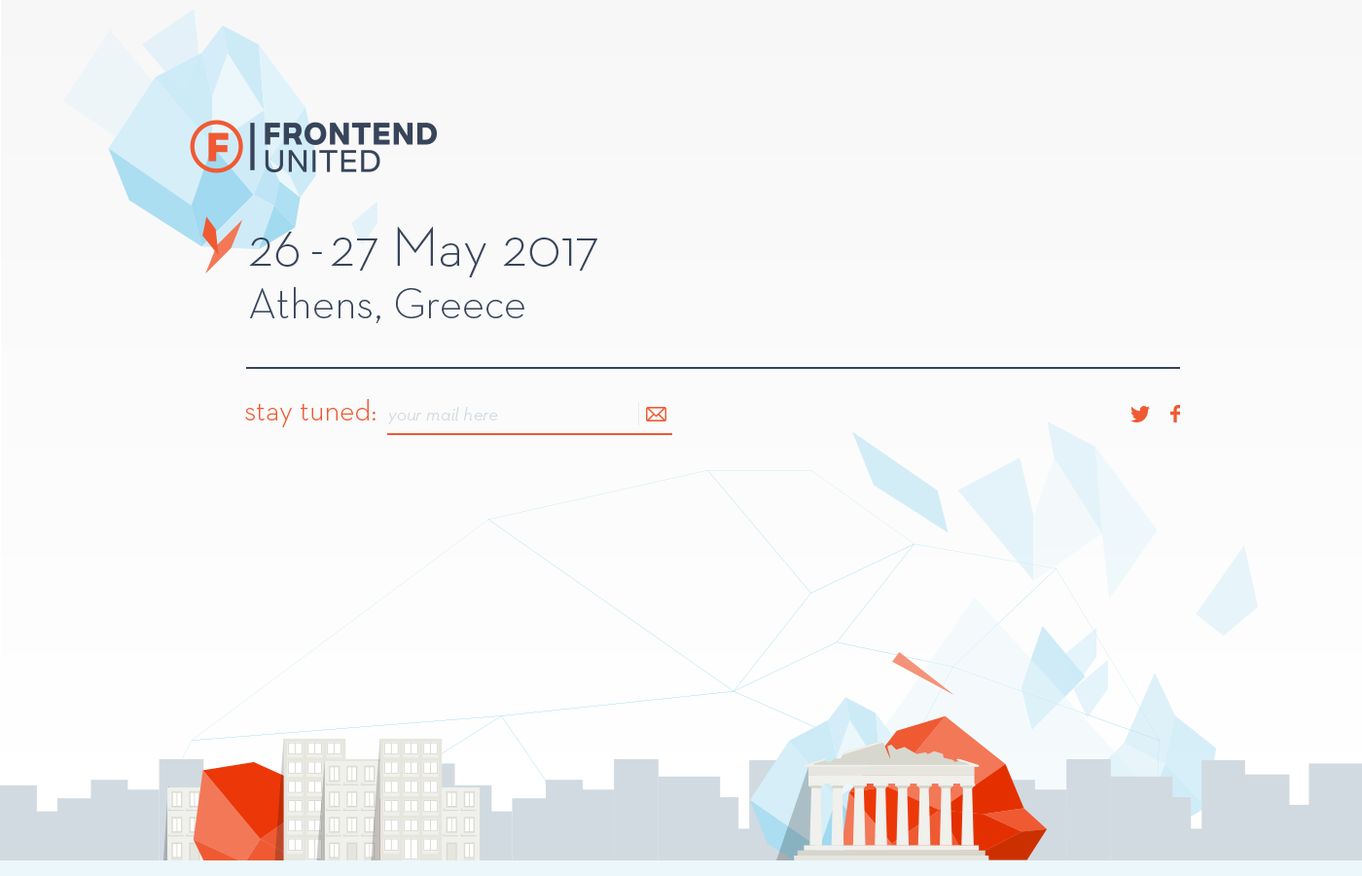
<style>
.page{position:relative;width:1362px;height:876px}
.page>*{position:absolute;margin:0}
.t1{font:43.7px "NeutrafaceTextGreek-Light";color:#37445a}
.t2{font:55.2px "NeutrafaceTextGreek-Light";color:#37445a}
.t3{font:55.2px "NeutrafaceTextGreek-Light";letter-spacing:-0.08em;color:#37445a}
.t4{font:29.9px "NeutrafaceTwoTextGreek-Light";color:#f05a33}
.t5{font:19.2px "NeutrafaceTwoTextGreek-LightItalic";color:#d1dae0}
</style>
<div class="page">
<p class="t1" style="left:249px;top:227px;width:348px;height:96px"><span class="t2">26</span><span class="t3"> - </span><span class="t2">27 May 2017<br></span>Athens, Greece</p>
<p class="t4" style="left:245px;top:399px;width:131px;height:28px">stay tuned:</p>
<p class="t5" style="left:388px;top:407px;width:110px;height:17px">your mail here</p>
</div>
